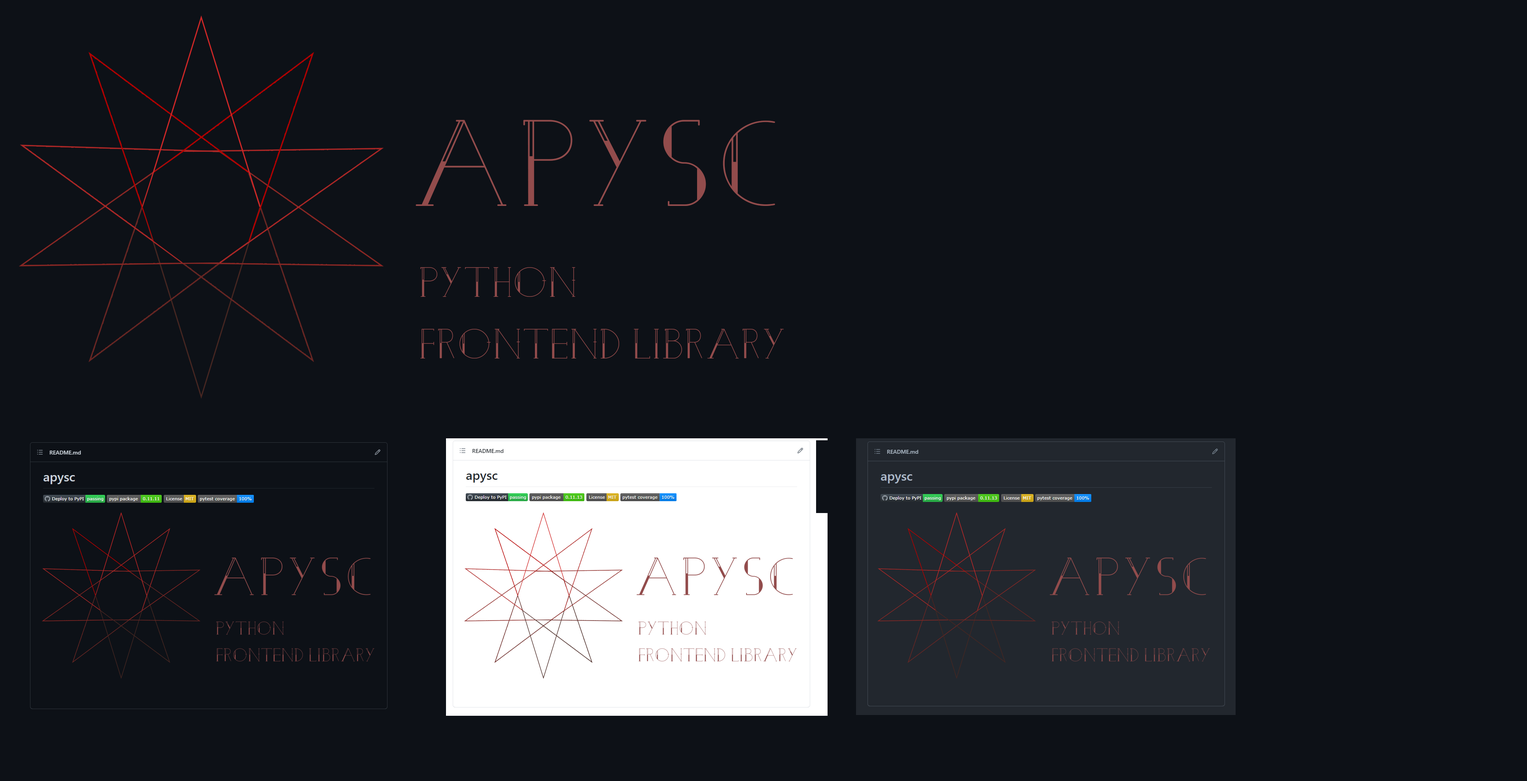
<style>
.page{position:relative;width:1527px;height:781px;background:#0d1117}
.page>*{position:absolute;margin:0}
.t1{font:172px "Pauline-Regular";color:#924c4c}
.t2{font:42.3px/61.7px "Pauline-Regular";color:#924c4c}
</style>
<div class="page">
<p class="t1" style="left:415px;top:120px;width:360px;height:86px">apysc</p>
<p class="t2" style="left:420px;top:267px;width:363px;height:92px">PYTHON<br>FRONTEND LIBRARY</p>
</div>
